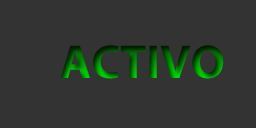
<style>
.page{position:relative;width:256px;height:128px;background:#333333}
.page>*{position:absolute;margin:0}
.t1{font:48px "MyriadPro-Bold"}
</style>
<div class="page">
<p class="t1" style="left:60px;top:45px;width:164px;height:34px">ACTIVO</p>
</div>
